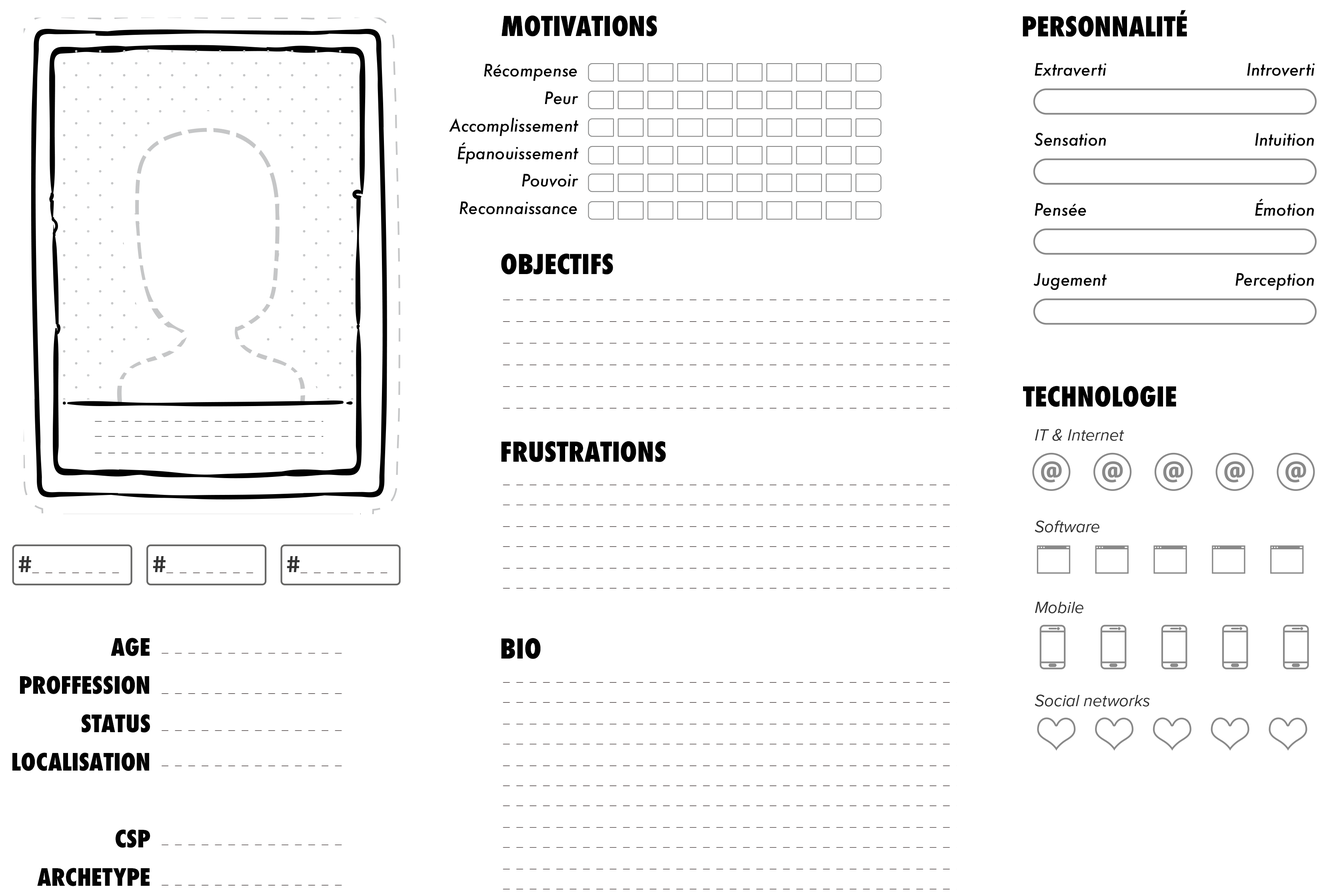
<style>
.page{position:relative;width:1333px;height:895px;background:#ffffff}
.page>*{position:absolute;margin:0}
.t1{font:26.7px "Futura-CondensedExtraBold";color:#000000;text-transform:uppercase}
.t2{font:16.7px/27.5px "Futura-MediumItalic";color:#000000}
.t3{font:16.7px/35px "Futura-MediumItalic";color:#000000}
.t4{font:23.3px/38.3px "Futura-CondensedExtraBold";color:#020202;text-transform:uppercase}
</style>
<div class="page">
<p class="t1" style="left:501px;top:15px;width:156px;height:21px">Motivations</p>
<p class="t1" style="left:1023px;top:10px;width:164px;height:27px">Personnalité</p>
<p class="t2" style="left:449px;top:64px;width:129px;height:150px;text-align:right">Récompense<br>Peur<br>Accomplissement<br>Épanouissement<br>Pouvoir<br>Reconnaissance</p>
<p class="t3" style="left:1033px;top:63px;width:74px;height:227px">Extraverti<br><br>Sensation<br><br>Pensée<br><br>Jugement</p>
<p class="t3" style="left:1235px;top:63px;width:80px;height:227px;text-align:right">Introverti<br><br>Intuition<br><br>Émotion<br><br>Perception</p>
<p class="t1" style="left:501px;top:253px;width:112px;height:21px">Objectifs</p>
<p class="t1" style="left:1023px;top:386px;width:153px;height:21px">Technologie</p>
<p class="t1" style="left:501px;top:441px;width:165px;height:21px">Frustrations</p>
<p class="t4" style="left:12px;top:637px;width:138px;height:249px;text-align:right">Age<br>Proffession<br>Status<br>Localisation<br><br>CSP<br>Archetype</p>
<p class="t1" style="left:501px;top:637px;width:40px;height:22px">Bio</p>
</div>
